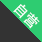
<style>
.page{position:relative;width:42px;height:42px;background:#333333}
.page>*{position:absolute;margin:0}
.t1{font:14px "SimHei";letter-spacing:0.04em;color:#ffffff}
</style>
<div class="page">
<p class="t1" style="left:13px;top:4px;width:27px;height:25px;rotate:45deg">自营</p>
</div>
